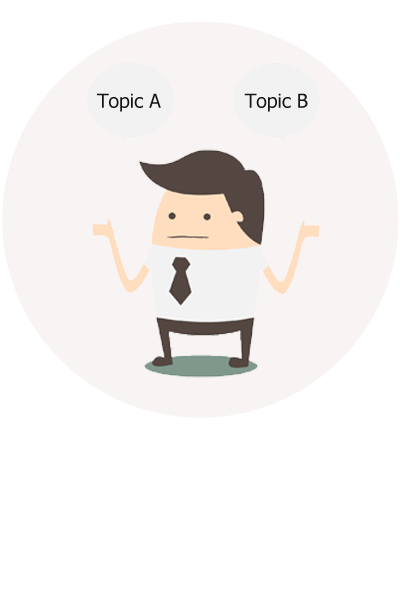
<style>
.page{position:relative;width:400px;height:600px;background:#ffffff}
.page>*{position:absolute;margin:0}
.t1{font:19.4px "Tahoma";color:#161515}
</style>
<div class="page">
<p class="t1" style="left:97px;top:93px;width:64px;height:19px">Topic A</p>
<p class="t1" style="left:244px;top:93px;width:64px;height:19px">Topic B</p>
</div>
